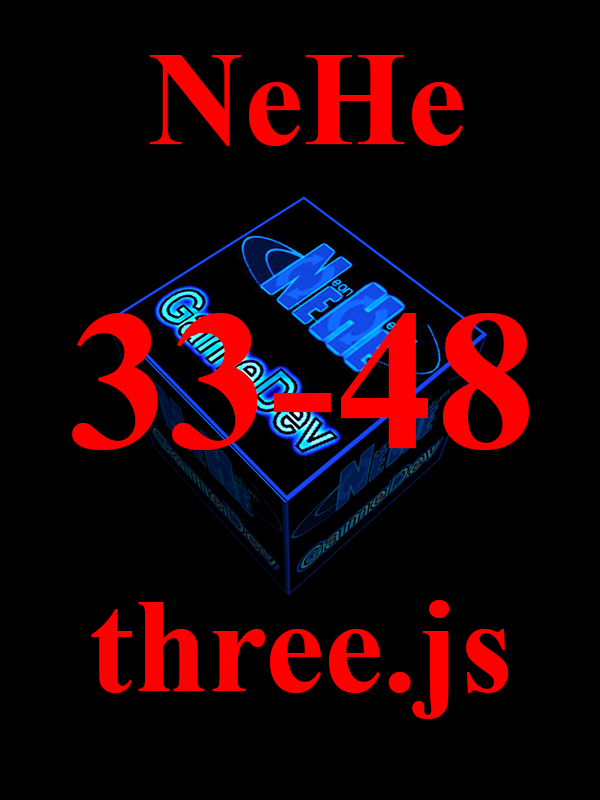
<style>
.page{position:relative;width:600px;height:800px;background:#000000}
.page>*{position:absolute;margin:0}
.t1{font:133.3px "TimesNewRomanPS-BoldMT";color:#ff0000}
.t2{font:200px "TimesNewRomanPS-BoldMT";color:#ff0000}
</style>
<div class="page">
<p class="t1" style="left:149px;top:55px;width:314px;height:91px">NeHe</p>
<p class="t2" style="left:72px;top:313px;width:457px;height:137px">33-48</p>
<p class="t1" style="left:91px;top:600px;width:418px;height:119px">three.js</p>
</div>
